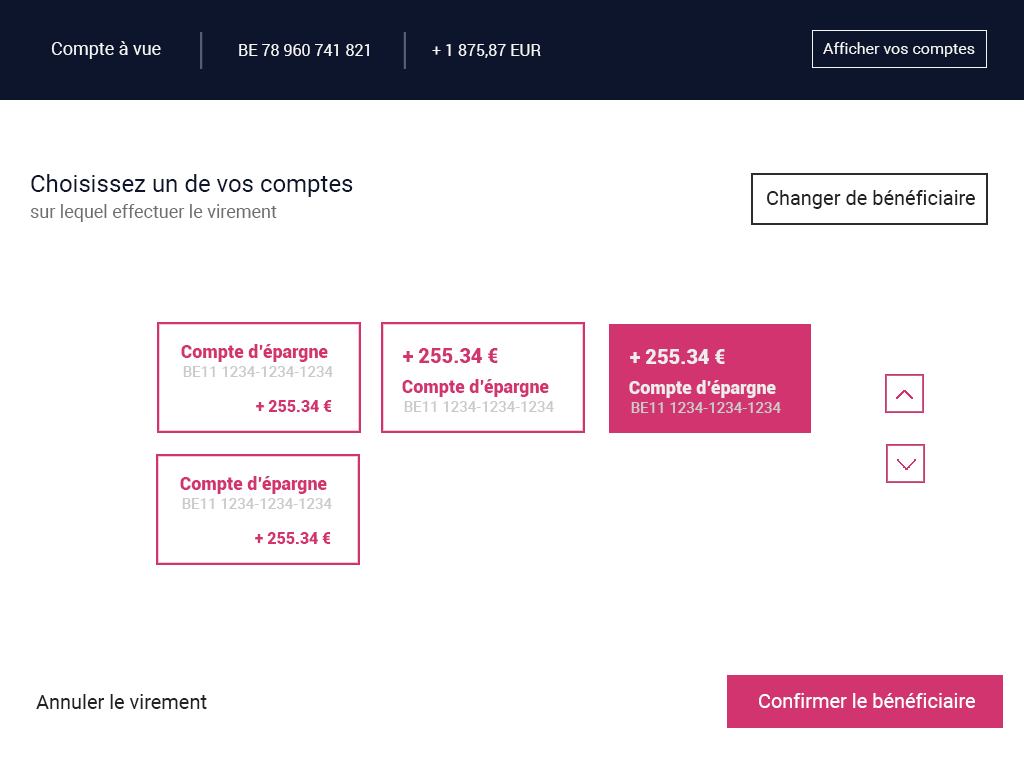
<style>
.page{position:relative;width:1024px;height:768px;background:#ffffff}
.page>*{position:absolute;margin:0}
.t1{font:18px "Roboto-Regular";color:#f5f5f5}
.t2{font:16px "Roboto-Regular";color:#f5f5f5}
.t3{font:24px "Roboto-Regular";color:#0d152d}
.t4{font:20px "Roboto-Regular";color:#222222}
.t5{font:18px "Roboto-Regular";color:#6e6e6e}
.t6{font:18px "Roboto-Black";color:#d1346e}
.t7{font:20px "Roboto-Black";color:#d1346e}
.t8{font:20px "Roboto-Black";color:#ededed}
.t9{font:14.9px "Roboto-Medium";color:#cacaca}
.t10{font:18px "Roboto-Black";color:#ededed}
.t11{font:15.9px "Roboto-Black";color:#d1346e}
.t12{font:20px "Roboto-Regular";color:#ffffff}
</style>
<div class="page">
<p class="t1" style="left:51px;top:41px;width:110px;height:18px">Compte à vue</p>
<p class="t2" style="left:239px;top:44px;width:130px;height:12px">BE 78 960 741 821</p>
<p class="t2" style="left:432px;top:44px;width:109px;height:14px">+ 1 875,87 EUR</p>
<p class="t2" style="left:823px;top:42px;width:152px;height:15px">Afficher vos comptes</p>
<p class="t3" style="left:31px;top:174px;width:322px;height:23px">Choisissez un de vos comptes</p>
<p class="t4" style="left:767px;top:190px;width:208px;height:19px">Changer de bénéficiaire</p>
<p class="t5" style="left:30px;top:204px;width:247px;height:18px">sur lequel effectuer le virement</p>
<p class="t6" style="left:181px;top:344px;width:147px;height:18px">Compte d’épargne</p>
<p class="t7" style="left:403px;top:348px;width:95px;height:15px">+ 255.34 €</p>
<p class="t8" style="left:630px;top:349px;width:95px;height:15px">+ 255.34 €</p>
<p class="t9" style="left:183px;top:366px;width:150px;height:11px">BE11 1234-1234-1234</p>
<p class="t6" style="left:402px;top:379px;width:147px;height:18px">Compte d’épargne</p>
<p class="t10" style="left:629px;top:380px;width:147px;height:18px">Compte d’épargne</p>
<p class="t11" style="left:256px;top:400px;width:76px;height:12px">+ 255.34 €</p>
<p class="t9" style="left:404px;top:401px;width:150px;height:11px">BE11 1234-1234-1234</p>
<p class="t9" style="left:631px;top:402px;width:150px;height:11px">BE11 1234-1234-1234</p>
<p class="t6" style="left:180px;top:476px;width:147px;height:18px">Compte d’épargne</p>
<p class="t9" style="left:182px;top:498px;width:150px;height:11px">BE11 1234-1234-1234</p>
<p class="t11" style="left:255px;top:532px;width:76px;height:12px">+ 255.34 €</p>
<p class="t4" style="left:36px;top:694px;width:171px;height:15px">Annuler le virement</p>
<p class="t12" style="left:759px;top:693px;width:216px;height:15px">Confirmer le bénéficiaire</p>
</div>
